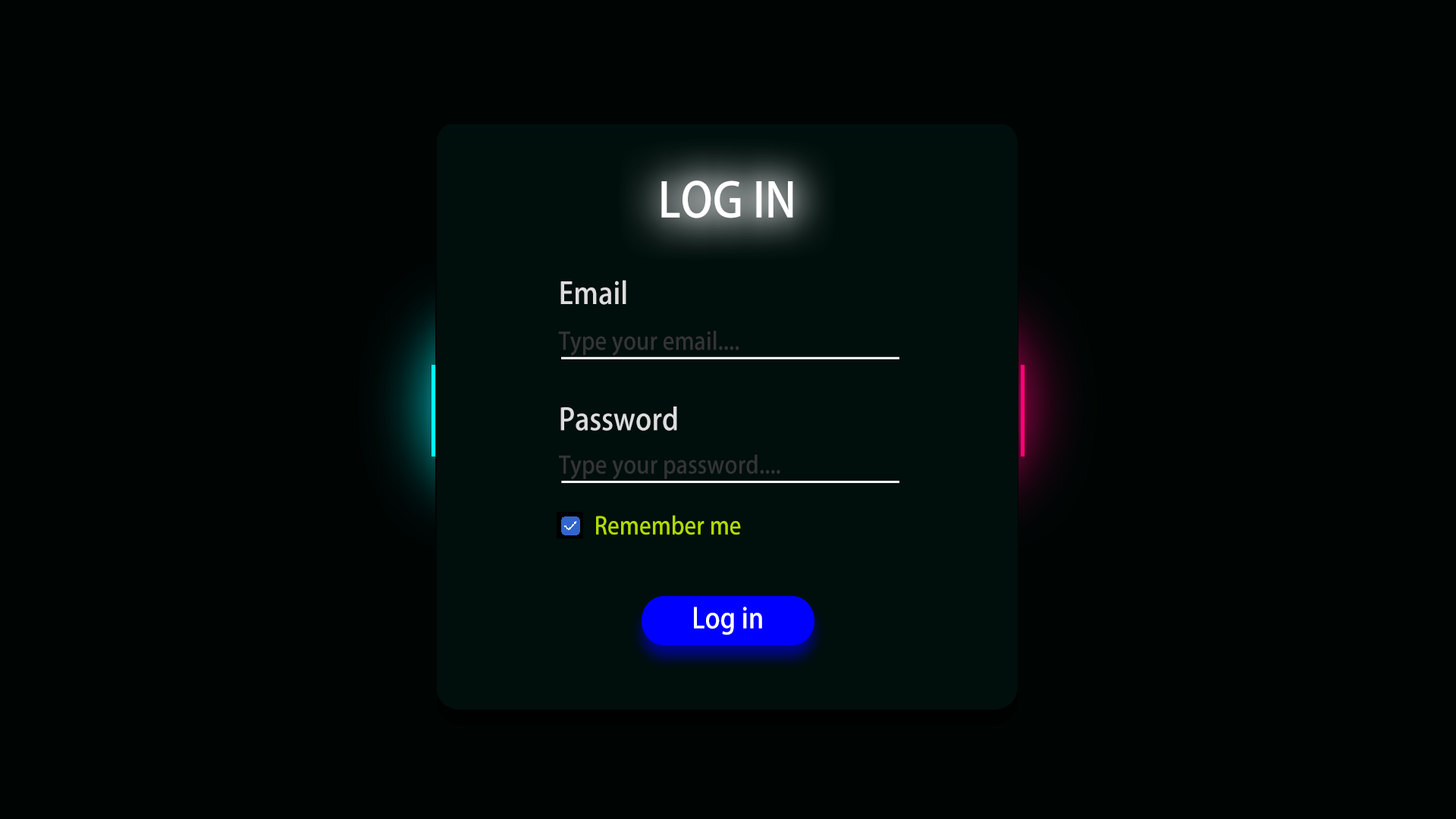
<style>
.page{position:relative;width:1456px;height:819px;background:#000504}
.page>*{position:absolute;margin:0}
.t1{font:47.2px "KozGoPr6N-Medium";letter-spacing:0.005em;color:#ffffff;scale:0.92 1}
.t2{font:29.7px "KozGoPr6N-Medium";letter-spacing:0.005em;color:#dddddd;scale:0.92 1}
.t3{font:23.7px "KozGoPr6N-Medium";letter-spacing:0.005em;color:#343434;scale:0.92 1}
.t4{font:23.6px "KozGoPr6N-Medium";letter-spacing:0.005em;color:#343434;scale:0.92 1}
.t5{font:23.7px "KozGoPr6N-Medium";letter-spacing:0.005em;color:#b0dc01;scale:0.92 1}
.t6{font:27.6px "KozGoPr6N-Medium";letter-spacing:0.005em;color:#ffffff;scale:0.92 1}
</style>
<div class="page">
<p class="t1" style="left:661px;top:180px;width:132px;height:38px">LOG IN</p>
<p class="t2" style="left:560px;top:280px;width:66px;height:25px">Email</p>
<p class="t3" style="left:558px;top:331px;width:181px;height:25px">Type your email....</p>
<p class="t2" style="left:560px;top:406px;width:117px;height:25px">Password</p>
<p class="t4" style="left:559px;top:454px;width:221px;height:26px">Type your password....</p>
<p class="t5" style="left:596px;top:515px;width:145px;height:20px">Remember me</p>
<p class="t6" style="left:694px;top:607px;width:68px;height:28px">Log in</p>
</div>
